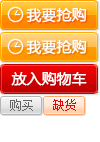
<style>
.page{position:relative;width:100px;height:142px;background:#ffffff}
.page>*{position:absolute;margin:0}
.t1{font:14.6px "MicrosoftYaHei";color:#ffffff;font-weight:bold}
</style>
<div class="page">
<p class="t1" style="left:26px;top:8px;width:61px;height:15px">我要抢购</p>
<p class="t1" style="left:26px;top:40px;width:61px;height:15px">我要抢购</p>
<p class="t1" style="left:11px;top:72px;width:76px;height:14px">放入购物车</p>
</div>
